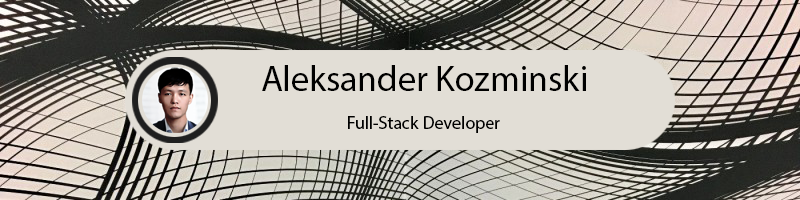
<style>
.page{position:relative;width:800px;height:200px;background:#e2ded6}
.page>*{position:absolute;margin:0}
.t1{font:36px "MyriadPro-Regular";color:#000000}
.t2{font:18px "MyriadPro-Regular";color:#000000}
</style>
<div class="page">
<p class="t1" style="left:262px;top:65px;width:324px;height:26px">Aleksander Kozminski</p>
<p class="t2" style="left:348px;top:116px;width:152px;height:17px">Full-Stack Developer</p>
</div>
